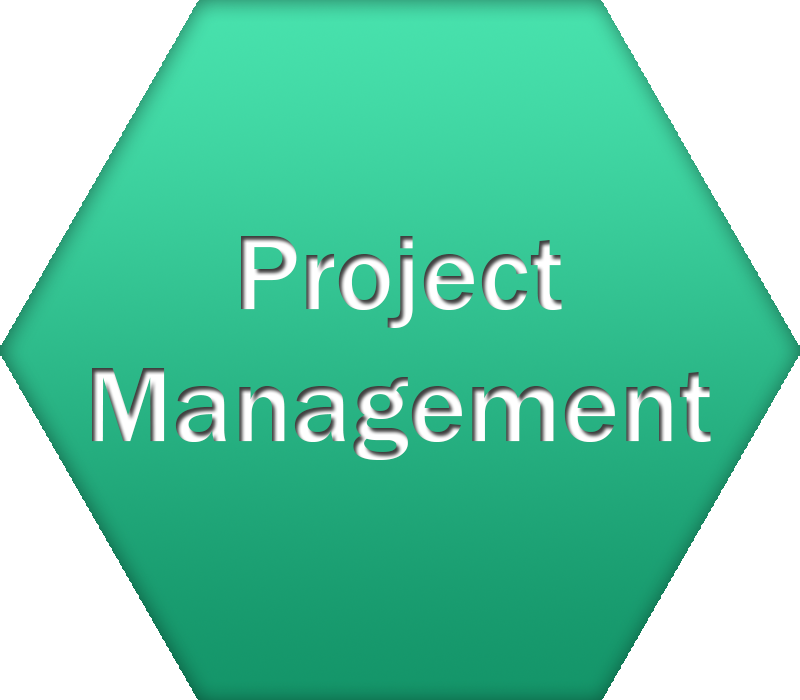
<style>
.page{position:relative;width:800px;height:700px;background:#ffffff}
.page>*{position:absolute;margin:0}
.t1{font:110px "FranklinGothic-Medium"}
</style>
<div class="page">
<p class="t1" style="left:92px;top:236px;width:619px;height:224px;text-align:center">Project<br>Management</p>
</div>
